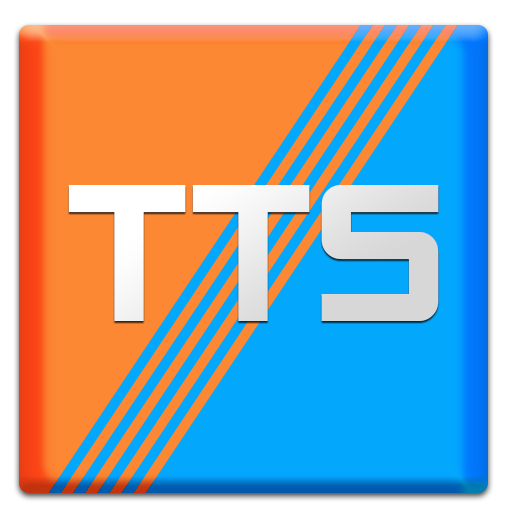
<style>
.page{position:relative;width:512px;height:512px;background:#fc8833}
.page>*{position:absolute;margin:0}
.t1{font:193.6px "SFAlienEncountersSolid";color:#e8e8e8}
</style>
<div class="page">
<p class="t1" style="left:68px;top:185px;width:371px;height:136px">TTS</p>
</div>
